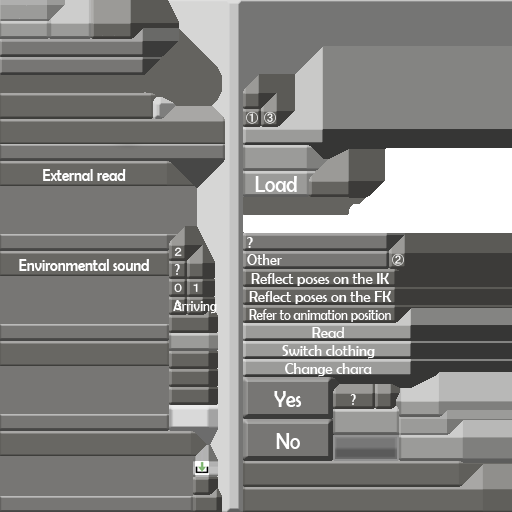
<style>
.page{position:relative;width:512px;height:512px;background:#777674}
.page>*{position:absolute;margin:0}
.t1{font:18px "BerlinSansFB-Reg";color:#ffffff;scale:0.82 1}
.t2{font:24px "BerlinSansFB-Reg";color:#ffffff;scale:0.82 1}
.t3{font:16px "BerlinSansFB-Reg";color:#ffffff;scale:0.94 1}
.t4{font:16px "BerlinSansFB-Reg";color:#ffffff;scale:0.9 1}
.t5{font:16px "BerlinSansFB-Reg";color:#ffffff;scale:0.82 1}
.t6{font:16px "BerlinSansFB-Reg";color:#ffffff;scale:0.79 1}
</style>
<div class="page">
<p class="t1" style="left:43px;top:169px;width:83px;height:12px">External read</p>
<p class="t2" style="left:255px;top:176px;width:42px;height:16px">Load</p>
<p class="t3" style="left:247px;top:237px;width:6px;height:11px">?</p>
<p class="t4" style="left:247px;top:254px;width:35px;height:11px">Other</p>
<p class="t1" style="left:19px;top:259px;width:130px;height:12px">Environmental sound</p>
<p class="t5" style="left:174px;top:264px;width:6px;height:11px">?</p>
<p class="t3" style="left:251px;top:273px;width:138px;height:13px">Reflect poses on the IK</p>
<p class="t3" style="left:249px;top:291px;width:143px;height:13px">Reflect poses on the FK</p>
<p class="t5" style="left:173px;top:300px;width:44px;height:14px">Arriving</p>
<p class="t6" style="left:249px;top:309px;width:142px;height:13px">Refer to animation position</p>
<p class="t3" style="left:312px;top:327px;width:32px;height:11px">Read</p>
<p class="t3" style="left:282px;top:345px;width:93px;height:14px">Switch clothing</p>
<p class="t3" style="left:285px;top:363px;width:87px;height:14px">Change chara</p>
<p class="t2" style="left:274px;top:391px;width:28px;height:16px">Yes</p>
<p class="t5" style="left:350px;top:394px;width:6px;height:11px">?</p>
<p class="t2" style="left:276px;top:433px;width:24px;height:16px">No</p>
</div>
